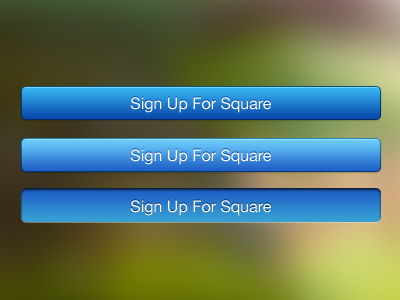
<style>
.page{position:relative;width:400px;height:300px}
.page>*{position:absolute;margin:0}
.t1{font:16px "HelveticaNeue";color:#ffffff}
</style>
<div class="page">
<p class="t1" style="left:130px;top:97px;width:141px;height:16px">Sign Up For Square</p>
<p class="t1" style="left:130px;top:149px;width:141px;height:16px">Sign Up For Square</p>
<p class="t1" style="left:130px;top:200px;width:141px;height:16px">Sign Up For Square</p>
</div>
